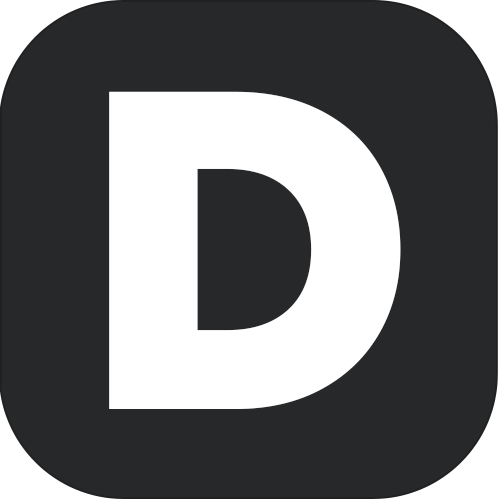
<style>
.page{position:relative;width:500px;height:500px;background:#262829}
.page>*{position:absolute;margin:0}
.t1{font:448px "Poppins-ExtraBold";color:#ffffff}
</style>
<div class="page">
<p class="t1" style="left:109px;top:91px;width:292px;height:318px">D</p>
</div>
